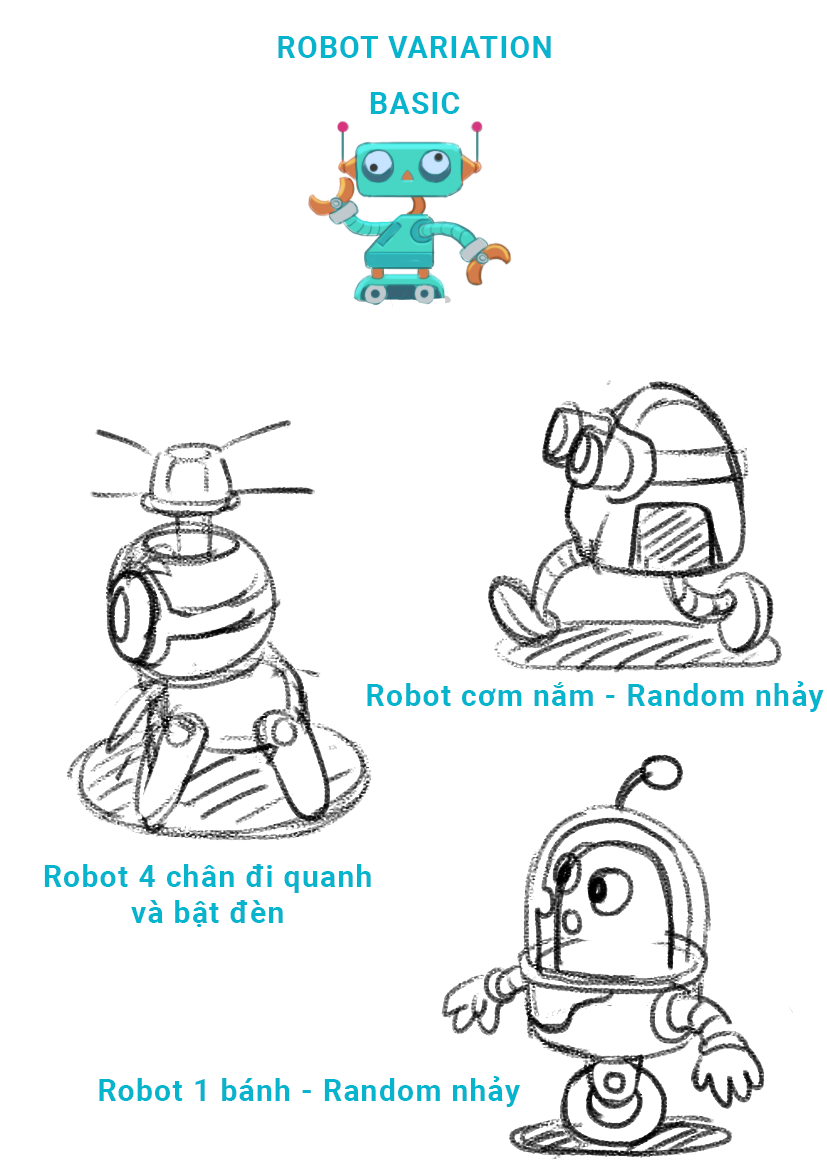
<style>
.page{position:relative;width:827px;height:1169px;background:#ffffff}
.page>*{position:absolute;margin:0}
.t1{font:30px "Roboto-Bold";letter-spacing:0.05em;color:#06b4cd}
</style>
<div class="page">
<p class="t1" style="left:278px;top:36px;width:273px;height:22px">ROBOT VARIATION</p>
<p class="t1" style="left:370px;top:92px;width:90px;height:22px">BASIC</p>
<p class="t1" style="left:367px;top:681px;width:457px;height:31px">Robot cơm nắm - Random nhảy</p>
<p class="t1" style="left:44px;top:864px;width:327px;height:63px;text-align:center">Robot 4 chân đi quanh<br>và bật đèn</p>
<p class="t1" style="left:99px;top:1076px;width:421px;height:31px">Robot 1 bánh - Random nhảy</p>
</div>
